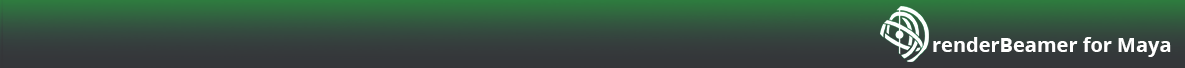
<style>
.page{position:relative;width:1185px;height:68px}
.page>*{position:absolute;margin:0}
.t1{font:20px "OpenSans-Bold";color:#ffffff}
</style>
<div class="page">
<p class="t1" style="left:933px;top:37px;width:238px;height:20px">renderBeamer for Maya</p>
</div>
